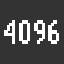
<style>
.page{position:relative;width:64px;height:64px;background:#333333}
.page>*{position:absolute;margin:0}
.t1{font:40.9px "Glasstown-NBP";letter-spacing:0.005em;color:#ffffff;font-weight:bold}
</style>
<div class="page">
<p class="t1" style="left:4px;top:20px;width:55px;height:24px">4096</p>
</div>
